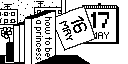
<style>
.page{position:relative;width:128px;height:64px;background:#ffffff}
.page>*{position:absolute;margin:0}
.t1{font:16.6px "HaxrCorp-4089-Cyrillic-AltGr";letter-spacing:-0.005em;color:#000000}
</style>
<div class="page">
<p class="t1" style="left:45px;top:17px;width:7px;height:17px;rotate:90deg">how</p>
<p class="t1" style="left:34px;top:27px;width:9px;height:33px;rotate:90deg">princess</p>
<p class="t1" style="left:36px;top:20px;width:5px;height:4px;rotate:90deg">a</p>
<p class="t1" style="left:45px;top:37px;width:7px;height:20px;rotate:90deg">to be</p>
</div>
